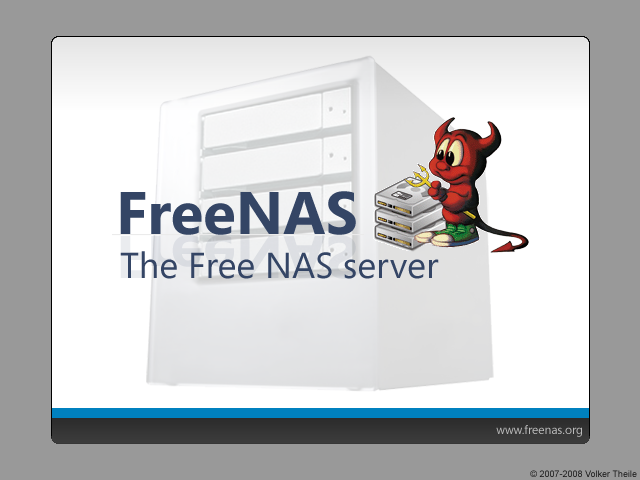
<style>
.page{position:relative;width:640px;height:480px;background:#999999}
.page>*{position:absolute;margin:0}
.t1{font:60px "SegoeUI-Bold";color:#344565}
.t2{font:36px "SegoeUI-Regular";color:#344565}
.t3{font:12px "SegoeUI-Regular";color:#bbbbbb}
.t4{font:9px "ArialMT";color:#151515}
</style>
<div class="page">
<p class="t1" style="left:120px;top:191px;width:236px;height:44px">FreeNAS</p>
<p class="t2" style="left:120px;top:251px;width:319px;height:28px">The Free NAS server</p>
<p class="t3" style="left:496px;top:425px;width:86px;height:12px">www.freenas.org</p>
<p class="t4" style="left:530px;top:470px;width:107px;height:7px">© 2007-2008 Volker Theile</p>
</div>
